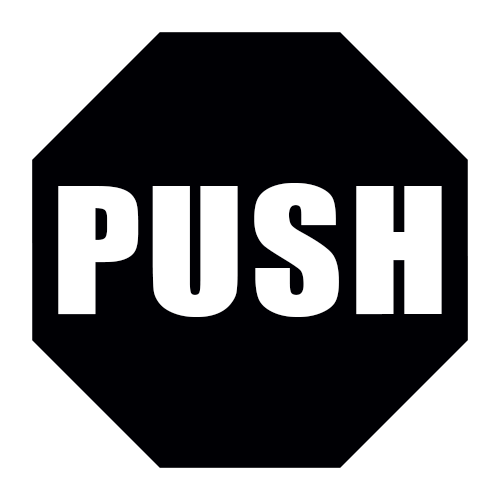
<style>
.page{position:relative;width:500px;height:500px;background:#000004}
.page>*{position:absolute;margin:0}
.t1{font:162px "Impact";letter-spacing:0.03em;color:#ffffff;scale:1.11 1}
</style>
<div class="page">
<p class="t1" style="left:58px;top:183px;width:384px;height:134px">PUSH</p>
</div>
